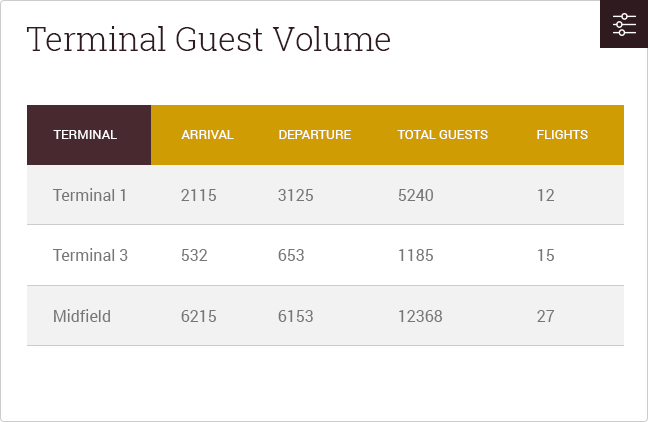
<style>
.page{position:relative;width:648px;height:422px;background:#ffffff}
.page>*{position:absolute;margin:0}
.t1{font:33px "RobotoSlab-Light";color:#2f1b1f}
.t2{font:13px "Roboto-Regular";color:#ffffff;text-transform:uppercase}
.t3{font:16px "Roboto-Regular";color:#767676}
</style>
<div class="page">
<p class="t1" style="left:26px;top:26px;width:364px;height:25px">Terminal Guest Volume</p>
<p class="t2" style="left:53px;top:130px;width:64px;height:9px">Terminal</p>
<p class="t2" style="left:181px;top:130px;width:53px;height:9px">Arrival</p>
<p class="t2" style="left:279px;top:130px;width:72px;height:9px">Departure</p>
<p class="t2" style="left:397px;top:130px;width:91px;height:9px">Total Guests</p>
<p class="t2" style="left:537px;top:130px;width:51px;height:9px">Flights</p>
<p class="t3" style="left:52px;top:188px;width:73px;height:13px">Terminal 1</p>
<p class="t3" style="left:181px;top:189px;width:35px;height:12px">2115</p>
<p class="t3" style="left:278px;top:189px;width:35px;height:12px">3125</p>
<p class="t3" style="left:398px;top:189px;width:35px;height:12px">5240</p>
<p class="t3" style="left:538px;top:189px;width:17px;height:12px">12</p>
<p class="t3" style="left:52px;top:248px;width:76px;height:13px">Terminal 3</p>
<p class="t3" style="left:181px;top:249px;width:27px;height:12px">532</p>
<p class="t3" style="left:278px;top:249px;width:26px;height:12px">653</p>
<p class="t3" style="left:399px;top:249px;width:34px;height:12px">1185</p>
<p class="t3" style="left:538px;top:249px;width:16px;height:12px">15</p>
<p class="t3" style="left:54px;top:309px;width:56px;height:13px">Midfield</p>
<p class="t3" style="left:181px;top:310px;width:35px;height:12px">6215</p>
<p class="t3" style="left:278px;top:310px;width:35px;height:12px">6153</p>
<p class="t3" style="left:399px;top:310px;width:44px;height:12px">12368</p>
<p class="t3" style="left:537px;top:310px;width:18px;height:12px">27</p>
</div>
